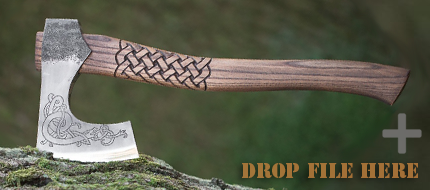
<style>
.page{position:relative;width:430px;height:190px}
.page>*{position:absolute;margin:0}
.t1{font:20px "StencilStd";color:#a27138}
</style>
<div class="page">
<p class="t1" style="left:242px;top:163px;width:176px;height:15px">Drop File Here</p>
</div>
